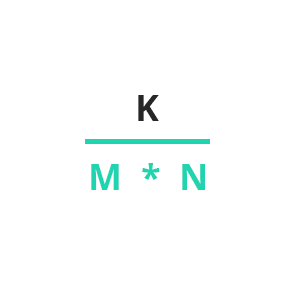
<style>
.page{position:relative;width:300px;height:300px;background:#ffffff}
.page>*{position:absolute;margin:0}
.t1{font:36px "OpenSans-Bold";color:#272727}
.t2{font:36px "OpenSans-Bold";color:#1fd4af}
</style>
<div class="page">
<p class="t1" style="left:138px;top:95px;width:21px;height:26px">K</p>
<p class="t2" style="left:91px;top:163px;width:114px;height:27px">M  *  N</p>
</div>
